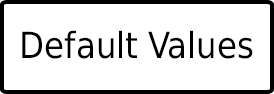
<style>
.page{position:relative;width:274px;height:94px;background:#ffffff}
.page>*{position:absolute;margin:0}
.t1{font:36px "DejaVuSansCondensed";color:#000000}
</style>
<div class="page">
<p class="t1" style="left:22px;top:30px;width:231px;height:29px">Default Values</p>
</div>
